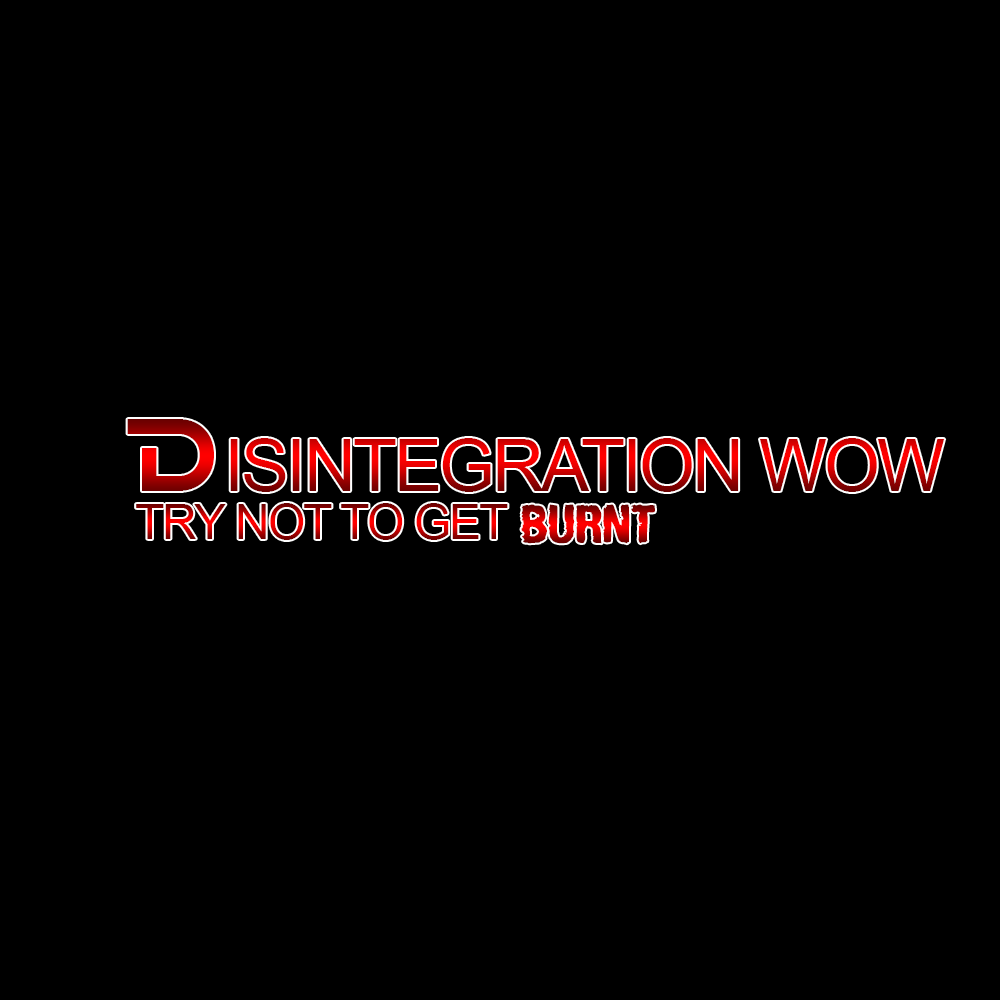
<style>
.page{position:relative;width:1000px;height:1000px;background:#000000}
.page>*{position:absolute;margin:0}
.t1{font:72px "ArialMT";letter-spacing:-0.04em}
.t2{font:72px "Alternity";letter-spacing:-0.04em}
.t3{font:48px "ArialMT";letter-spacing:-0.04em}
.t4{font:48px "ArmyChalk";letter-spacing:-0.04em}
</style>
<div class="page">
<p class="t1" style="left:127px;top:419px;width:818px;height:73px"><span class="t2">D</span>ISINTEGRATION WOW</p>
<p class="t3" style="left:136px;top:503px;width:372px;height:37px">TRY NOT TO GET</p>
<p class="t4" style="left:521px;top:504px;width:134px;height:40px">BURNT</p>
</div>
